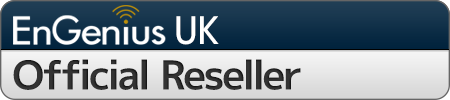
<style>
.page{position:relative;width:450px;height:100px}
.page>*{position:absolute;margin:0}
.t1{font:38px "mplus-2p-medium";color:#ffffff;scale:0.9 1}
.t2{font:40px "mplus-2p-bold";letter-spacing:-0.04em;color:#333333}
</style>
<div class="page">
<p class="t1" style="left:176px;top:16px;width:43px;height:29px">UK</p>
<p class="t2" style="left:13px;top:59px;width:288px;height:31px">Official Reseller</p>
</div>
